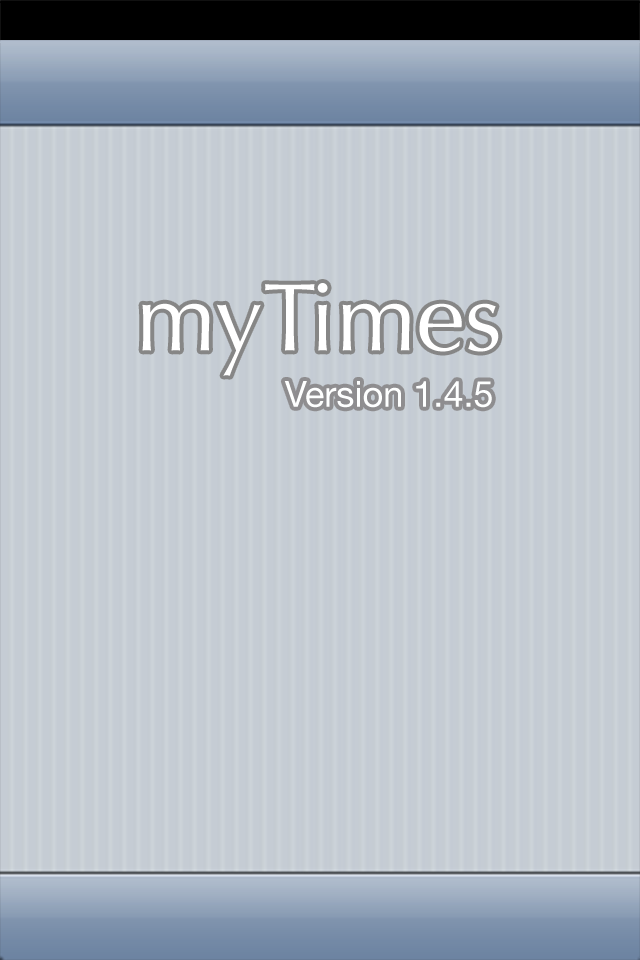
<style>
.page{position:relative;width:640px;height:960px;background:#c5ccd4}
.page>*{position:absolute;margin:0}
.t1{font:96.2px "Optima-Regular";color:#ffffff}
.t2{font:36.1px "HelveticaNeue";color:#feffff}
</style>
<div class="page">
<p class="t1" style="left:142px;top:283px;width:357px;height:93px">myTimes</p>
<p class="t2" style="left:284px;top:381px;width:208px;height:27px">Version 1.4.5</p>
</div>
